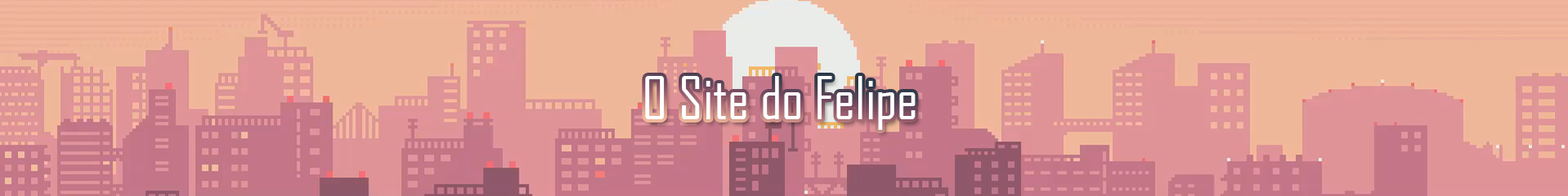
<style>
.page{position:relative;width:1568px;height:196px}
.page>*{position:absolute;margin:0}
.t1{font:57.2px "AgencyFB-Reg";color:#ffffff}
</style>
<div class="page">
<p class="t1" style="left:645px;top:76px;width:270px;height:54px">O Site do Felipe</p>
</div>
